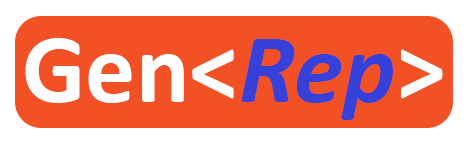
<style>
.page{position:relative;width:468px;height:144px;background:#f25126}
.page>*{position:absolute;margin:0}
.t1{font:100px "Calibri-Bold";color:#ffffff}
.t2{font:100px "Calibri-BoldItalic";color:#3541d9}
</style>
<div class="page">
<p class="t1" style="left:25px;top:38px;width:418px;height:82px">Gen&lt;<span class="t2">Rep</span>&gt;</p>
</div>
